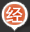
<style>
.page{position:relative;width:30px;height:32px;background:#333333}
.page>*{position:absolute;margin:0}
.t1{font:18px "SimHei";color:#ffffff}
</style>
<div class="page">
<p class="t1" style="left:6px;top:6px;width:17px;height:17px">经</p>
</div>
